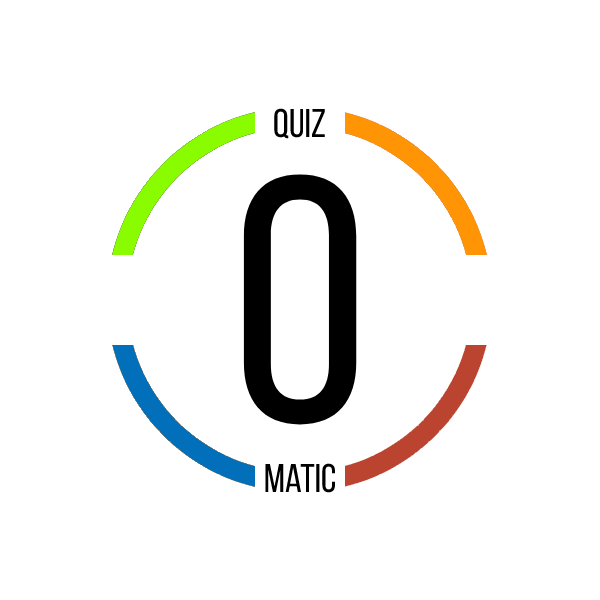
<style>
.page{position:relative;width:600px;height:600px;background:#ffffff}
.page>*{position:absolute;margin:0}
.t1{font:40px "BebasNeueRegular";color:#000000}
.t2{font:350px "BebasNeueRegular";color:#000000}
</style>
<div class="page">
<p class="t1" style="left:274px;top:108px;width:51px;height:31px">Quiz</p>
<p class="t2" style="left:243px;top:174px;width:114px;height:251px">O</p>
<p class="t1" style="left:265px;top:463px;width:70px;height:30px">Matic</p>
</div>
